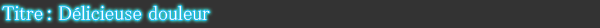
<style>
.page{position:relative;width:600px;height:28px;background:#333333}
.page>*{position:absolute;margin:0}
.t1{font:20px "MS-PMincho";color:#ffffff}
</style>
<div class="page">
<p class="t1" style="left:2px;top:5px;width:208px;height:16px">Titre : Délicieuse douleur</p>
</div>
